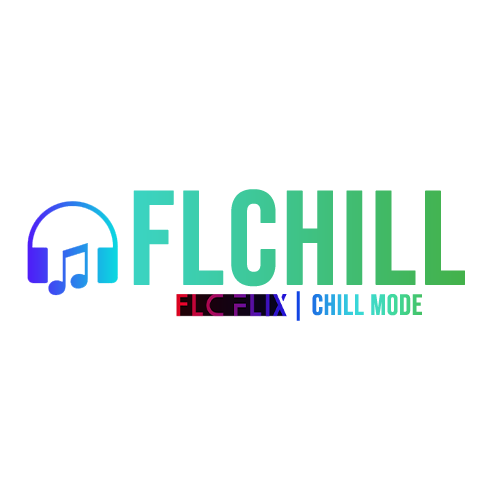
<style>
.page{position:relative;width:500px;height:500px;background:#ffffff}
.page>*{position:absolute;margin:0}
.t1{font:133.3px "BebasNeue-Regular";font-weight:bold}
.t2{font:29.2px "BebasNeue-Regular";font-weight:bold}
</style>
<div class="page">
<p class="t1" style="left:133px;top:189px;width:332px;height:98px">FLChill</p>
<p class="t2" style="left:296px;top:291px;width:126px;height:30px">| Chill Mode</p>
</div>
